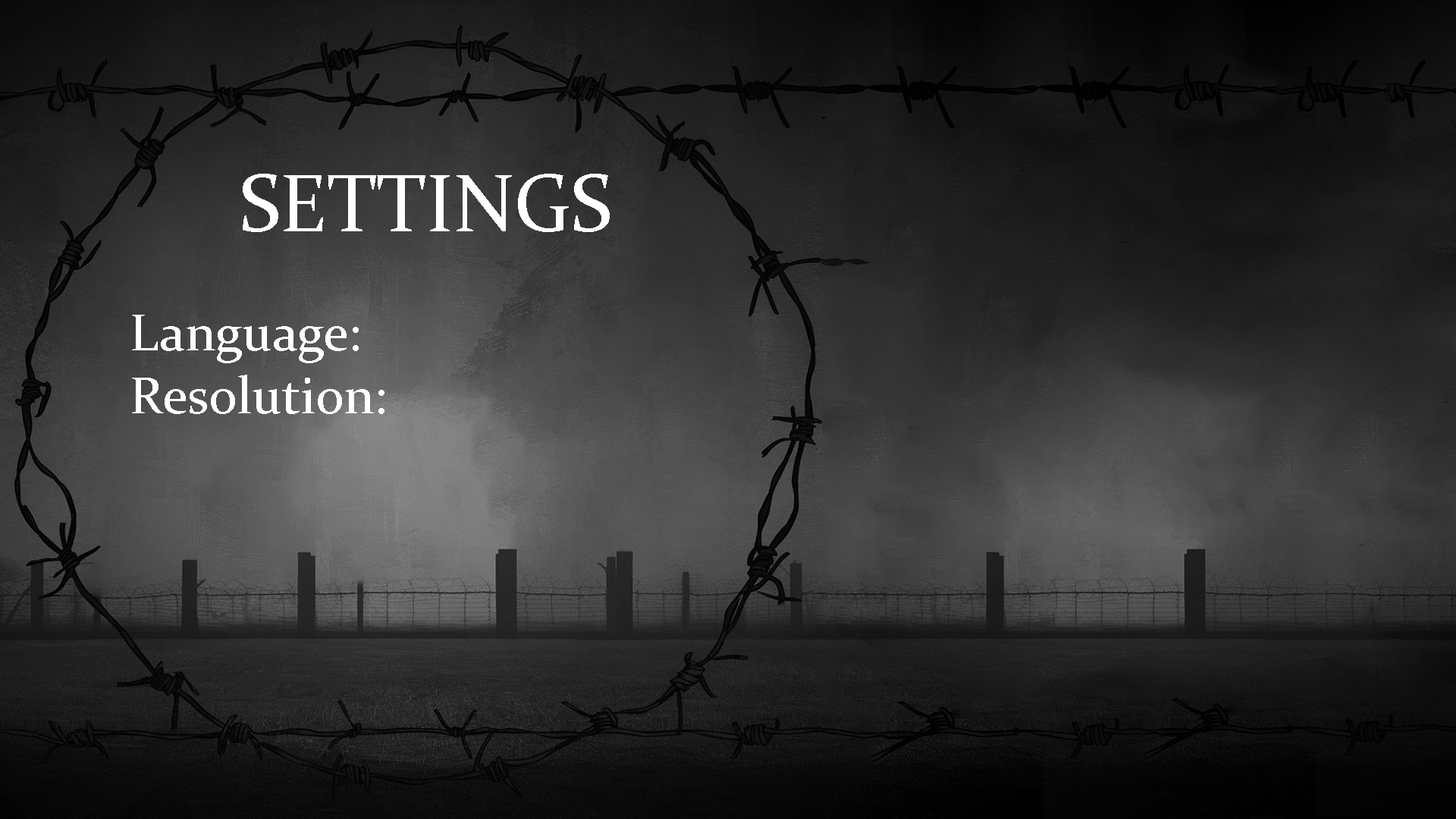
<style>
.page{position:relative;width:1456px;height:819px}
.page>*{position:absolute;margin:0}
.t1{font:80.8px "Constantia";color:#ffffff}
.t2{font:52.6px "Constantia";color:#ffffff}
</style>
<div class="page">
<p class="t1" style="left:243px;top:174px;width:367px;height:58px">SETTINGS</p>
<p class="t2" style="left:132px;top:315px;width:252px;height:99px;text-align:center">Language:<br>  Resolution:</p>
</div>
